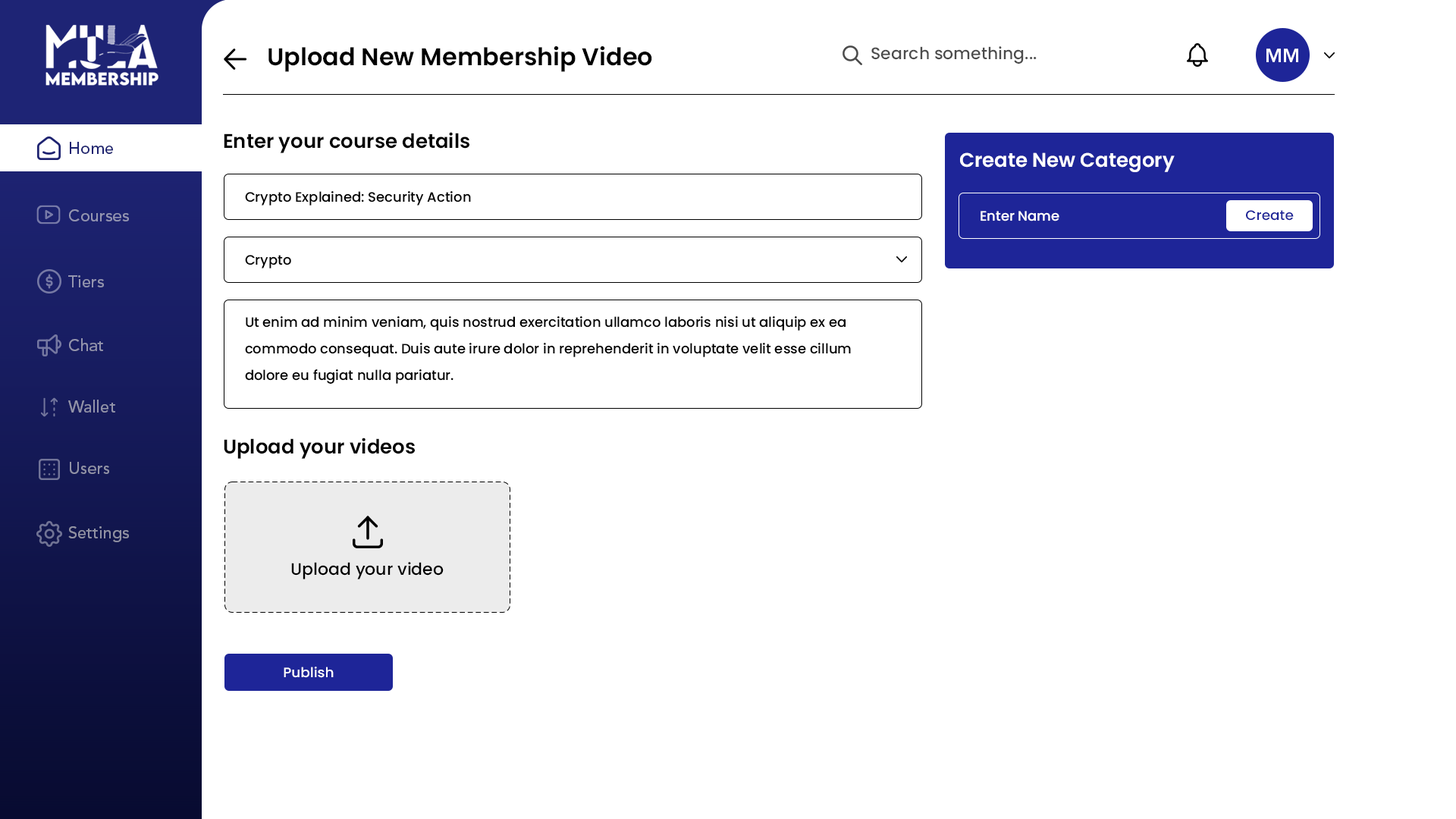
<style>
.page{position:relative;width:1456px;height:819px;background:#ffffff}
.page>*{position:absolute;margin:0}
.t1{font:24.3px "Poppins-SemiBold";color:#000000}
.t2{font:16.7px "Poppins-Medium";color:#4c4c4c}
.t3{font:19px "AvenirLTPro-Heavy";color:#ffffff}
.t4{font:19.7px "Poppins-SemiBold";color:#000000}
.t5{font:16.7px "AvenirLTPro-Medium";color:#1c2270}
.t6{font:19.7px "Poppins-SemiBold";color:#ffffff}
.t7{font:13.6px "Poppins-Medium";color:#000000}
.t8{font:16.7px "AvenirLTPro-Medium";color:#9395b1}
.t9{font:13.6px "Poppins-Medium";color:#ffffff}
.t10{font:13.6px "Poppins-Medium";color:#1e2598}
.t11{font:16.7px "AvenirLTPro-Medium";color:#9394ae}
.t12{font:13.6px/26.5px "Poppins-Medium";color:#000000}
.t13{font:16.7px "AvenirLTPro-Medium";color:#9293ac}
.t14{font:16.7px "AvenirLTPro-Medium";color:#9293a9}
.t15{font:16.7px "AvenirLTPro-Medium";color:#9192a6}
.t16{font:16.7px "AvenirLTPro-Medium";color:#9191a3}
.t17{font:16.6px "Poppins-Medium";color:#000000}
</style>
<div class="page">
<p class="t1" style="left:268px;top:46px;width:384px;height:26px">Upload New Membership Video</p>
<p class="t2" style="left:871px;top:46px;width:166px;height:18px">Search something...</p>
<p class="t3" style="left:1266px;top:49px;width:32px;height:13px">MM</p>
<p class="t4" style="left:224px;top:132px;width:245px;height:21px">Enter your course details</p>
<p class="t5" style="left:70px;top:142px;width:43px;height:12px">Home</p>
<p class="t6" style="left:960px;top:152px;width:215px;height:20px">Create New Category</p>
<p class="t7" style="left:245px;top:191px;width:226px;height:15px">Crypto Explained: Security Action</p>
<p class="t8" style="left:69px;top:209px;width:60px;height:12px">Courses</p>
<p class="t9" style="left:981px;top:211px;width:78px;height:10px">Enter Name</p>
<p class="t10" style="left:1246px;top:210px;width:48px;height:11px">Create</p>
<p class="t7" style="left:245px;top:255px;width:46px;height:13px">Crypto</p>
<p class="t11" style="left:68px;top:275px;width:36px;height:12px">Tiers</p>
<p class="t12" style="left:245px;top:316px;width:606px;height:68px">Ut enim ad minim veniam, quis nostrud exercitation ullamco laboris nisi ut aliquip ex ea <br>commodo consequat. Duis aute irure dolor in reprehenderit in voluptate velit esse cillum <br>dolore eu fugiat nulla pariatur.</p>
<p class="t13" style="left:69px;top:338px;width:34px;height:13px">Chat</p>
<p class="t14" style="left:68px;top:400px;width:47px;height:13px">Wallet</p>
<p class="t4" style="left:224px;top:438px;width:191px;height:21px">Upload your videos</p>
<p class="t15" style="left:70px;top:462px;width:39px;height:12px">Users</p>
<p class="t16" style="left:68px;top:526px;width:61px;height:16px">Settings</p>
<p class="t17" style="left:291px;top:562px;width:153px;height:17px">Upload your video</p>
<p class="t9" style="left:284px;top:667px;width:50px;height:11px">Publish</p>
</div>
